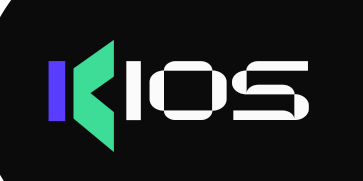
<style>
.page{position:relative;width:363px;height:181px;background:#0b0b0b}
.page>*{position:absolute;margin:0}
.t1{font:319.6px "NecosmicPersonalUse";letter-spacing:-0.05em;color:#3ddc97;scale:0.73 1}
.t2{font:85.5px "NecosmicPersonalUse";letter-spacing:-0.05em;color:#593eff;scale:1.42 1}
.t3{font:84px "NecosmicPersonalUse";letter-spacing:-0.05em;color:#fbfbfb;scale:1.26 1}
</style>
<div class="page">
<p class="t1" style="left:73px;top:40px;width:41px;height:112px">&lt;</p>
<p class="t2" style="left:48px;top:61px;width:18px;height:61px">i</p>
<p class="t3" style="left:126px;top:61px;width:183px;height:60px">ios</p>
</div>
